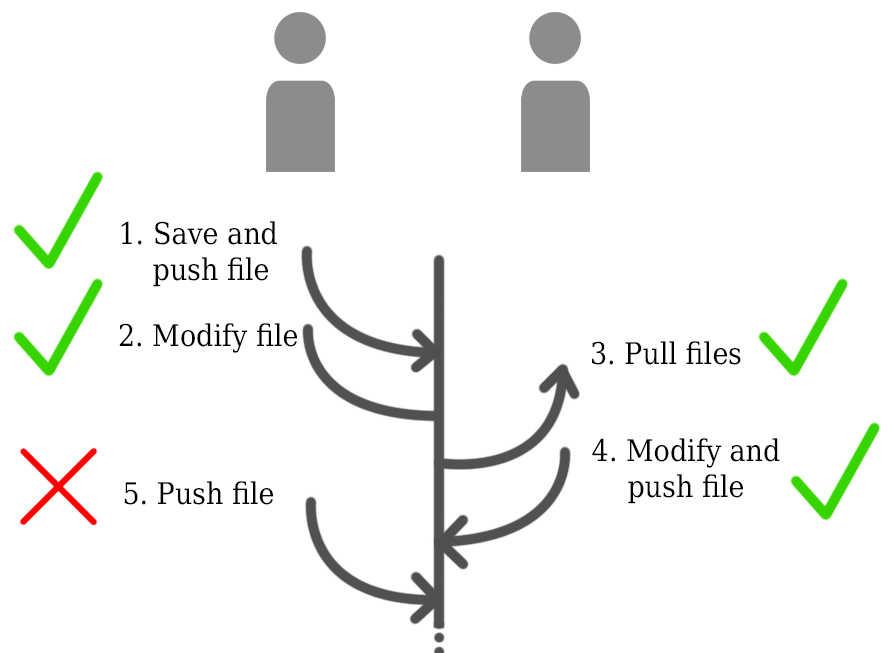
<style>
.page{position:relative;width:890px;height:653px;background:#ffffff}
.page>*{position:absolute;margin:0}
.t1{font:30px "DejaVuSerifCondensed";color:#000000}
</style>
<div class="page">
<p class="t1" style="left:121px;top:221px;width:156px;height:66px;text-align:center">1. Save and<br>   push file</p>
<p class="t1" style="left:119px;top:323px;width:179px;height:30px">2. Modify file</p>
<p class="t1" style="left:592px;top:341px;width:149px;height:24px">3. Pull files</p>
<p class="t1" style="left:592px;top:438px;width:188px;height:66px;text-align:center">4. Modify and push file</p>
<p class="t1" style="left:124px;top:481px;width:150px;height:24px">5. Push file</p>
</div>
